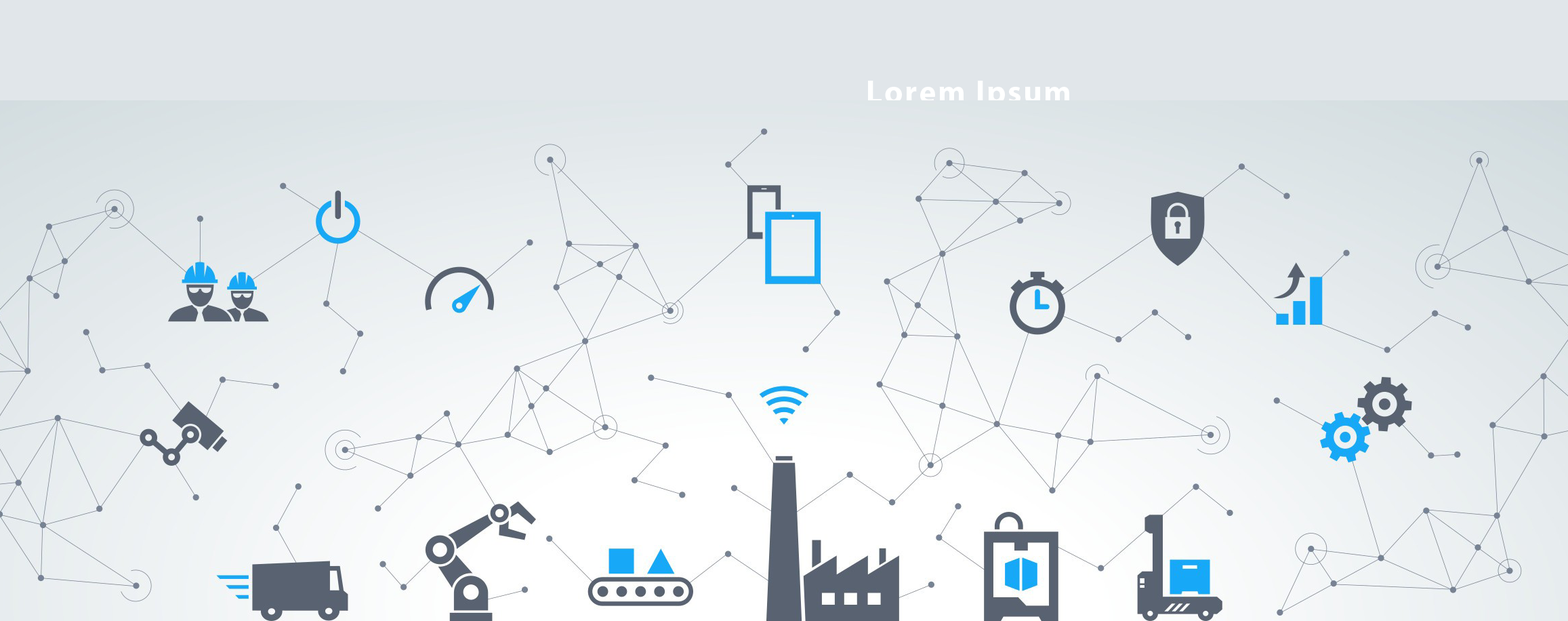
<style>
.page{position:relative;width:1568px;height:621px}
.page>*{position:absolute;margin:0}
.t1{font:32.5px "MyriadPro-Bold";letter-spacing:0.05em;color:#ffffff}
</style>
<div class="page">
<p class="t1" style="left:868px;top:81px;width:201px;height:29px">Lorem Ipsum</p>
</div>
